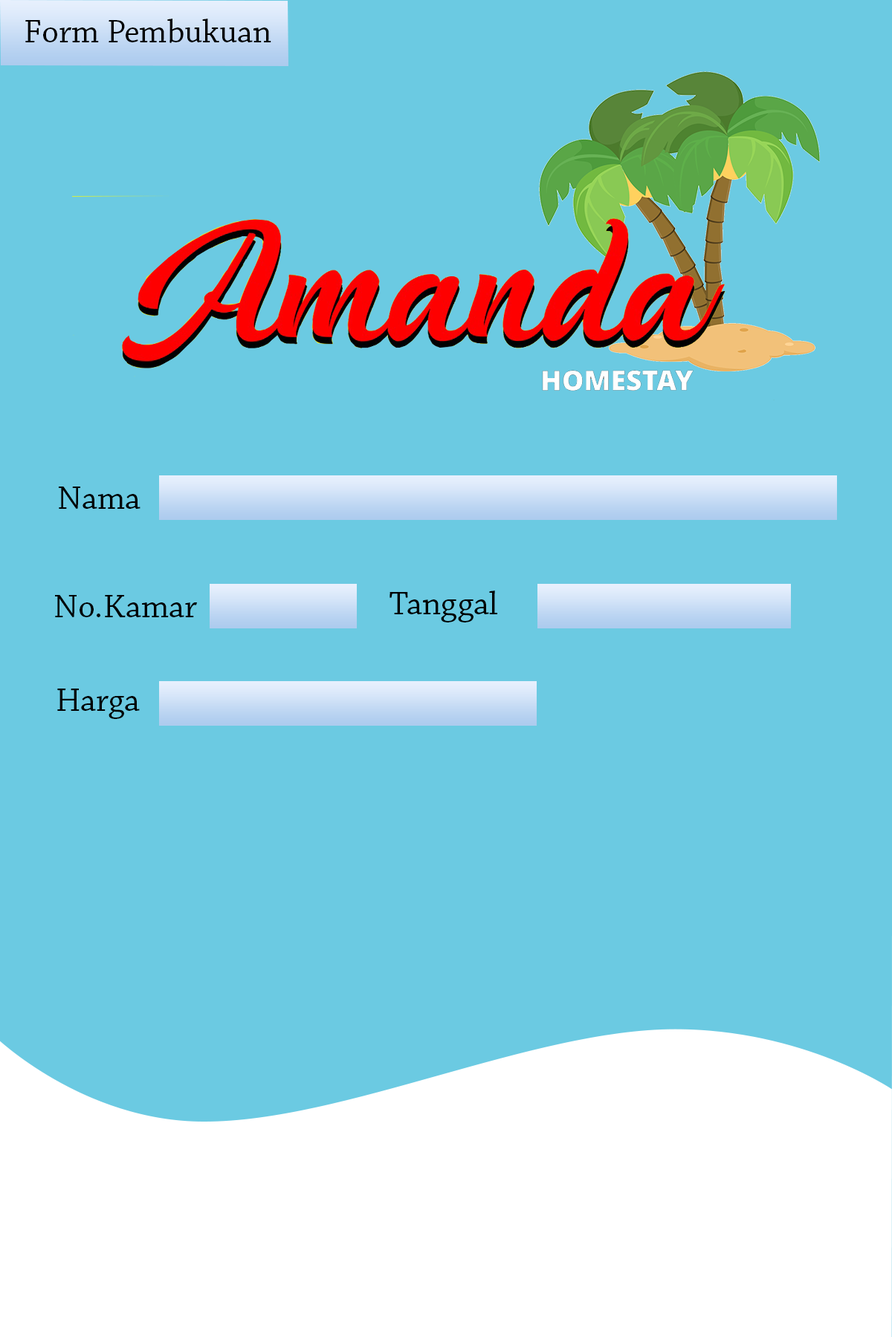
<style>
.page{position:relative;width:892px;height:1337px;background:#6bcae2}
.page>*{position:absolute;margin:0}
.t1{font:34.1px "ChaparralPro-Regular";color:#000101}
</style>
<div class="page">
<p class="t1" style="left:25px;top:19px;width:246px;height:24px">Form Pembukuan</p>
<p class="t1" style="left:59px;top:487px;width:81px;height:22px">Nama</p>
<p class="t1" style="left:389px;top:591px;width:108px;height:32px">Tanggal</p>
<p class="t1" style="left:55px;top:595px;width:142px;height:22px">No.Kamar</p>
<p class="t1" style="left:57px;top:689px;width:83px;height:30px">Harga</p>
</div>
